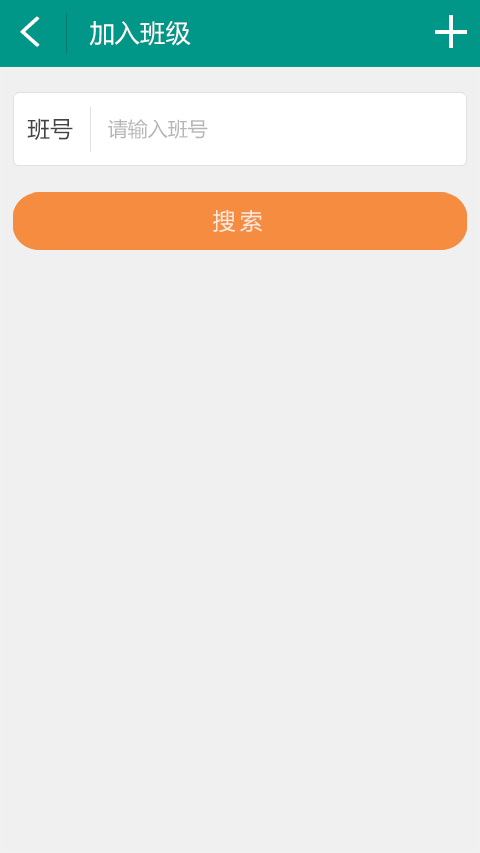
<style>
.page{position:relative;width:480px;height:853px;background:#f0f0f0}
.page>*{position:absolute;margin:0}
.t1{font:41.3px "SimHei";color:#ffffff;font-weight:bold}
.t2{font:25.3px "MicrosoftYaHei";color:#ffffff}
.t3{font:22.7px "MicrosoftYaHei";color:#444444}
.t4{font:20px "MicrosoftYaHei";color:#b6b6b6}
.t5{font:22.7px "MicrosoftYaHei";letter-spacing:0.2em;color:#fdebe2}
</style>
<div class="page">
<p class="t1" style="left:20px;top:16px;width:20px;height:31px">&lt;</p>
<p class="t2" style="left:89px;top:21px;width:102px;height:25px">加入班级</p>
<p class="t3" style="left:27px;top:118px;width:46px;height:22px">班号</p>
<p class="t4" style="left:108px;top:119px;width:100px;height:20px">请输入班号</p>
<p class="t5" style="left:213px;top:210px;width:49px;height:22px">搜索</p>
</div>
